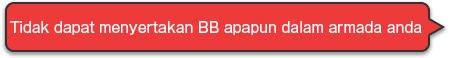
<style>
.page{position:relative;width:450px;height:58px;background:#ed3b3b}
.page>*{position:absolute;margin:0}
.t1{font:14px "GothicMB101Pro-Regular";color:#ffffff}
</style>
<div class="page">
<p class="t1" style="left:10px;top:21px;width:412px;height:14px">Tidak dapat menyertakan BB apapun dalam armada anda</p>
</div>
